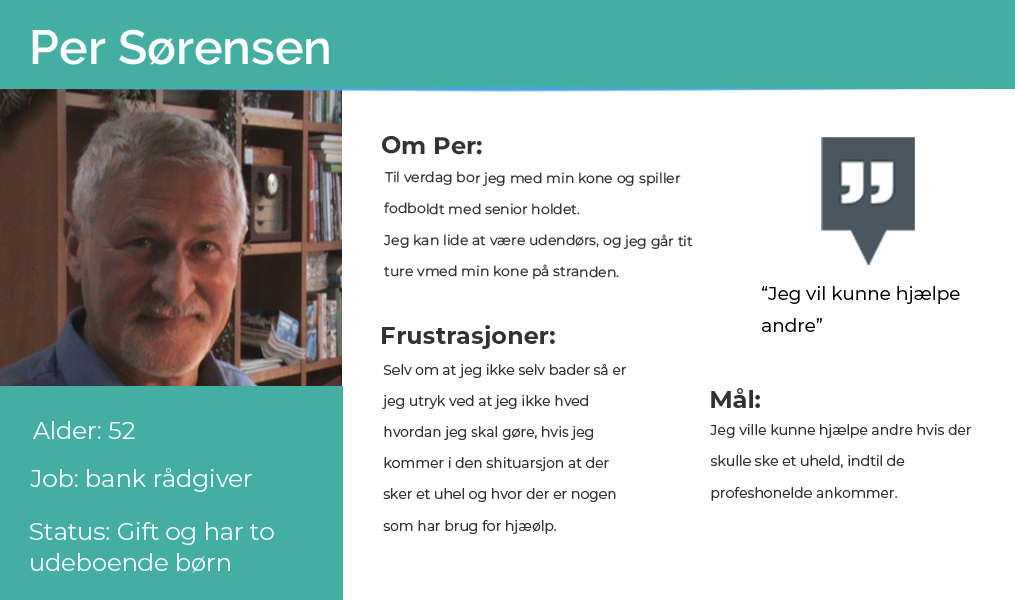
<style>
.page{position:relative;width:1015px;height:600px;background:#ffffff}
.page>*{position:absolute;margin:0}
.t1{font:48px "Raleway-SemiBold";color:#ffffff}
.t2{font:24px "Montserrat-Bold";color:#333333}
.t3{font:14px/31.2px "Montserrat-Regular";color:#333333}
.t4{font:18.5px/32.1px "Montserrat-Regular";color:#000000}
.t5{font:24px "Montserrat-Regular";color:#f1f9ff}
.t6{font:24px/31.2px "Montserrat-Regular";color:#f1f9ff}
</style>
<div class="page">
<p class="t1" style="left:32px;top:29px;width:297px;height:36px">Per Sørensen</p>
<p class="t2" style="left:382px;top:136px;width:100px;height:19px">Om Per:</p>
<p class="t3" style="left:383px;top:171px;width:310px;height:108px">Til verdag bor jeg med min kone og spiller fodboldt med senior holdet. <br>Jeg kan lide at være udendørs, og jeg går tit ture vmed min kone på stranden.</p>
<p class="t4" style="left:762px;top:286px;width:198px;height:46px">“Jeg vil kunne hjælpe andre”</p>
<p class="t2" style="left:382px;top:325px;width:173px;height:24px">Frustrasjoner:</p>
<p class="t3" style="left:382px;top:364px;width:244px;height:170px">Selv om at jeg ikke selv bader så er jeg utryk ved at jeg ikke hved hvordan jeg skal gøre, hvis jeg kommer i den shituarsjon at der sker et uhel og hvor der er nogen som har brug for hjæølp.</p>
<p class="t2" style="left:711px;top:388px;width:49px;height:20px">Mål:</p>
<p class="t5" style="left:33px;top:421px;width:102px;height:18px">Alder: 52</p>
<p class="t3" style="left:710px;top:424px;width:261px;height:77px">Jeg ville kunne hjælpe andre hvis der skulle ske et uheld, indtil de profeshonelde ankommer.</p>
<p class="t5" style="left:30px;top:468px;width:222px;height:24px">Job: bank rådgiver</p>
<p class="t6" style="left:29px;top:522px;width:245px;height:51px">Status: Gift og har to <br>udeboende børn</p>
</div>
